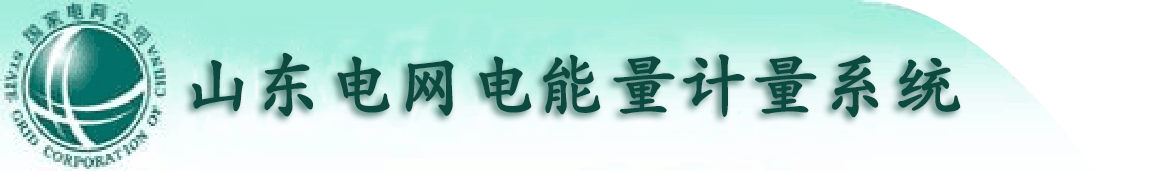
<style>
.page{position:relative;width:1164px;height:171px}
.page>*{position:absolute;margin:0}
.t1{font:69px "STKaiti";color:#0c4a40;font-weight:bold}
</style>
<div class="page">
<p class="t1" style="left:192px;top:52px;width:769px;height:66px">山东电网电能量计量系统</p>
</div>
